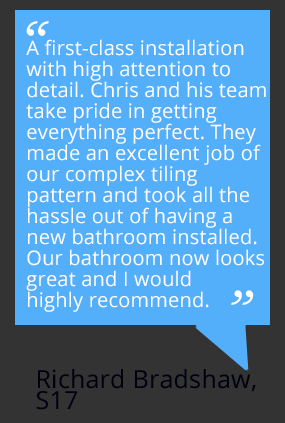
<style>
.page{position:relative;width:285px;height:423px;background:#54affa}
.page>*{position:absolute;margin:0}
.t1{font:20px/21px "OpenSans-Regular";letter-spacing:0.01em;color:#ffffff}
.t2{font:25px "OpenSans-Regular";letter-spacing:0.01em;color:#00000f}
</style>
<div class="page">
<p class="t1" style="left:26px;top:39px;width:240px;height:273px">A first-class installation with high attention to detail. Chris and his team take pride in getting everything perfect. They made an excellent job of our complex tiling pattern and took all the hassle out of having a new bathroom installed. Our bathroom now looks great and I would <br>highly recommend.</p>
<p class="t2" style="left:36px;top:369px;width:220px;height:41px">Richard Bradshaw, S17</p>
</div>
